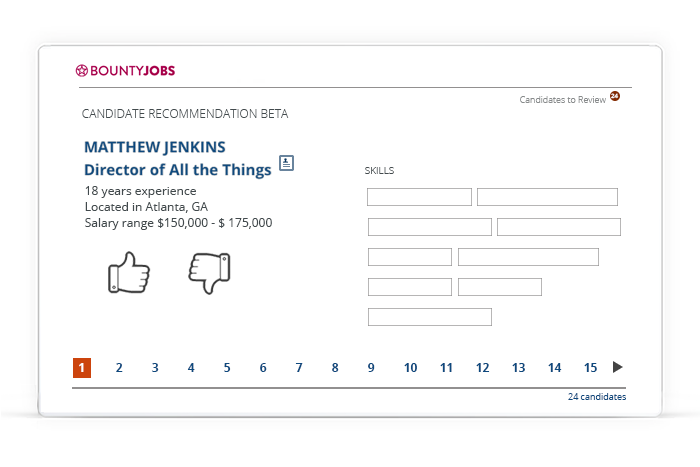
<style>
.page{position:relative;width:700px;height:467px;background:#ffffff}
.page>*{position:absolute;margin:0}
.t1{font:9px "OpenSans-Light";color:#888b8c}
.t2{font:6px "OpenSans-Bold";color:#ffffff}
.t3{font:12px "OpenSans-Light";color:#424a4d}
.t4{font:10px "OpenSans-Light";color:#424a4d}
.t5{font:12px/16px "OpenSans";color:#424a4d}
.t6{font:12px "OpenSans-Bold";color:#ffffff}
.t7{font:12px "OpenSans-Bold";color:#0e497e}
.t8{font:9px "OpenSans";color:#0e497e}
</style>
<div class="page">
<p class="t1" style="left:520px;top:96px;width:86px;height:7px">Candidates to Review</p>
<p class="t2" style="left:611px;top:93px;width:8px;height:6px">24</p>
<p class="t3" style="left:82px;top:109px;width:207px;height:9px">CANDIDATE RECOMMENDATION BETA</p>
<p class="t4" style="left:365px;top:167px;width:29px;height:7px">SKILLS</p>
<p class="t5" style="left:85px;top:186px;width:187px;height:44px">18 years experience<br>Located in Atlanta, GA<br>Salary range $150,000 - $ 175,000</p>
<p class="t6" style="left:79px;top:363px;width:5px;height:9px">1</p>
<p class="t7" style="left:116px;top:363px;width:481px;height:9px">2 3 4 5 6 7 8 9 10 11 12 13 14 15</p>
<p class="t8" style="left:568px;top:393px;width:58px;height:7px">24 candidates</p>
</div>
